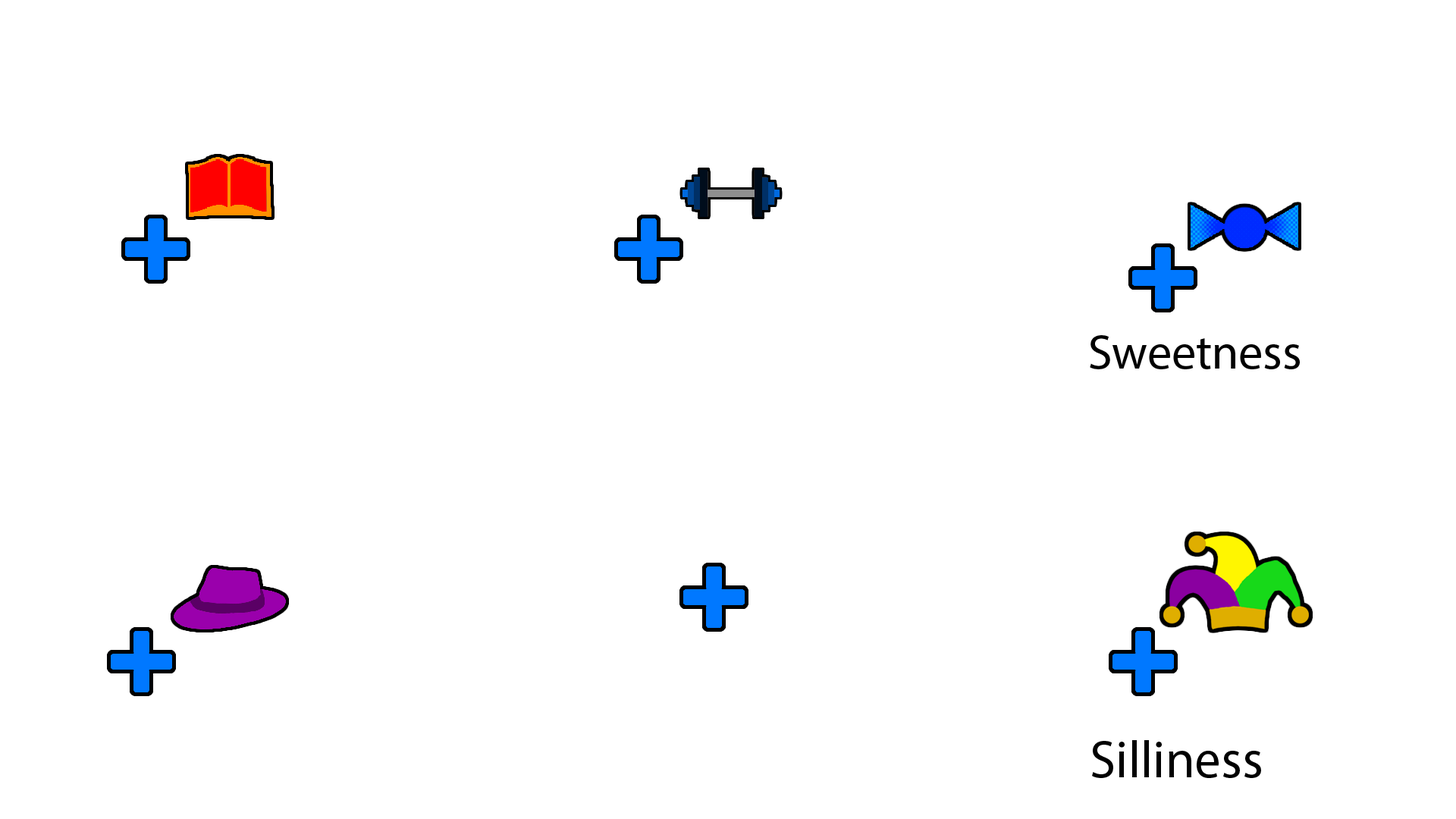
<style>
.page{position:relative;width:1456px;height:819px;background:#ffffff}
.page>*{position:absolute;margin:0}
.t1{font:48.5px "MyriadPro-Regular";color:#000000}
.t2{font:52.8px "MyriadPro-Regular";color:#000000}
</style>
<div class="page">
<p class="t1" style="left:1090px;top:335px;width:210px;height:34px">Sweetness</p>
<p class="t2" style="left:1092px;top:740px;width:169px;height:38px">Silliness</p>
</div>
